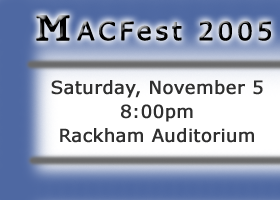
<style>
.page{position:relative;width:280px;height:200px}
.page>*{position:absolute;margin:0}
.t1{font:25px "Verdana";letter-spacing:0.12em;color:#000000;font-weight:bold}
.t2{font:36px "CenturySchoolbookBT-Monospace";letter-spacing:0.12em;color:#000000;font-weight:bold;scale:1.5 1}
.t3{font:18px/24px "Verdana";color:#2f2f2f;font-weight:bold}
.t4{font:24px "Verdana";letter-spacing:0.05em;color:#000000;font-weight:bold}
</style>
<div class="page">
<p class="t1" style="left:36px;top:15px;width:235px;height:26px"><span class="t2">M</span>ACFest 2005</p>
<p class="t3" style="left:51px;top:80px;width:212px;height:63px;text-align:center"><span class="t4"><br><br></span>Saturday, November 5<br>8:00pm<br>Rackham Auditorium</p>
</div>
